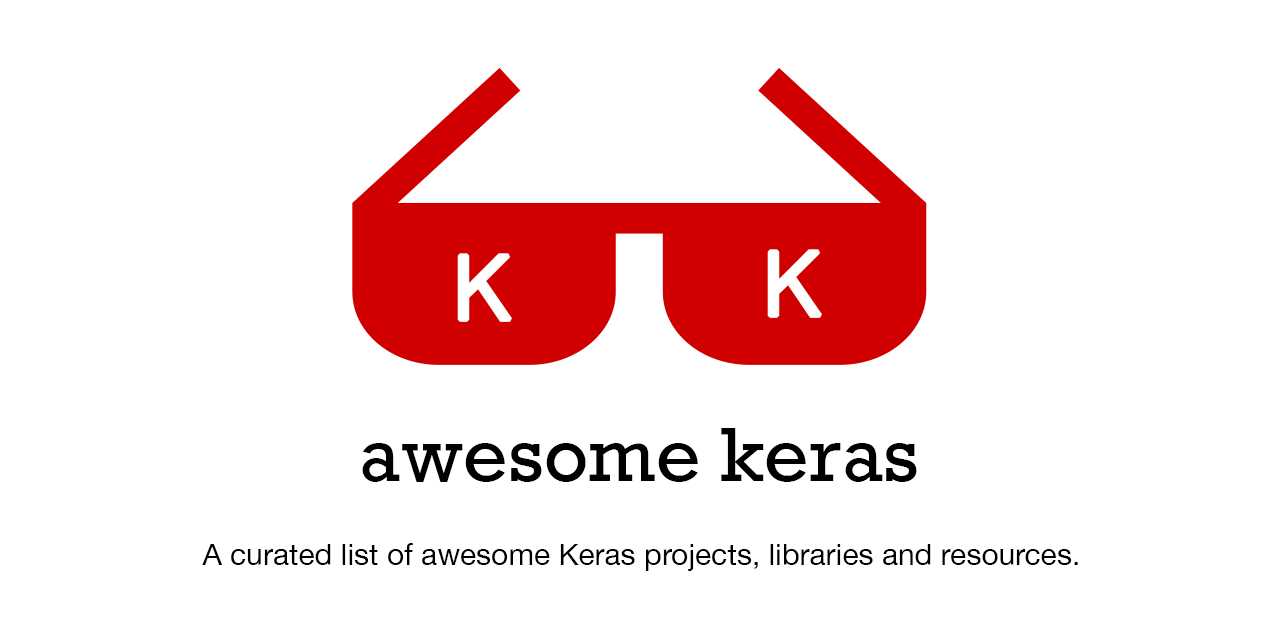
<style>
.page{position:relative;width:1280px;height:640px;background:#ffffff}
.page>*{position:absolute;margin:0}
.t1{font:72px "Rockwell-Regular";color:#000000}
.t2{font:30px "HelveticaNeue";color:#000000}
</style>
<div class="page">
<p class="t1" style="left:362px;top:428px;width:555px;height:54px">awesome keras</p>
<p class="t2" style="left:202px;top:543px;width:876px;height:28px">A curated list of awesome Keras projects, libraries and resources.</p>
</div>
